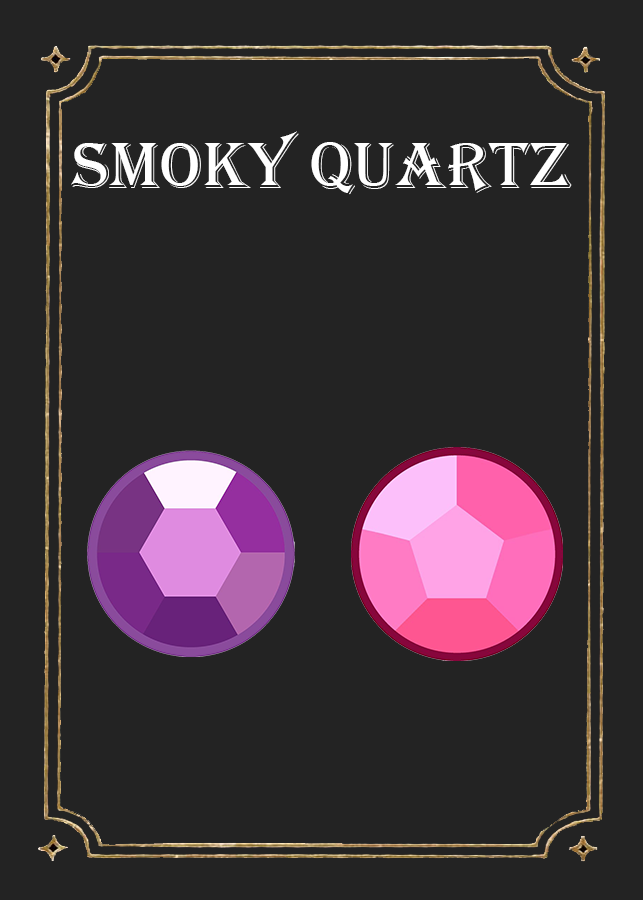
<style>
.page{position:relative;width:643px;height:900px;background:#232323}
.page>*{position:absolute;margin:0}
.t1{font:68.3px "Algerian";color:#ffffff}
</style>
<div class="page">
<p class="t1" style="left:71px;top:131px;width:501px;height:64px">smoky quartz</p>
</div>
